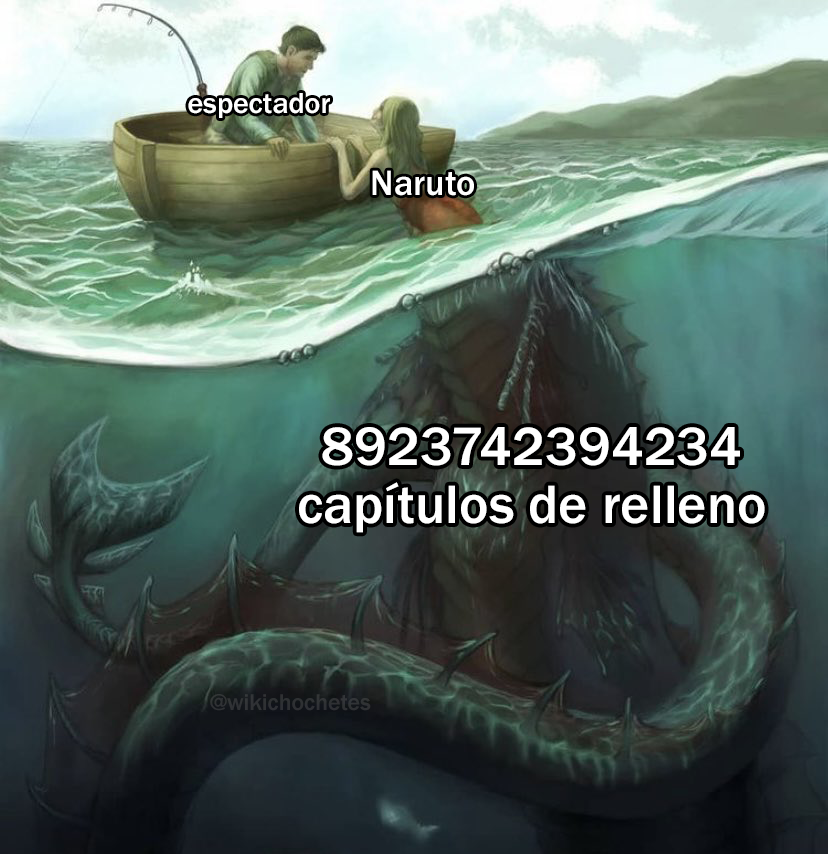
<style>
.page{position:relative;width:828px;height:854px}
.page>*{position:absolute;margin:0}
.t1{font:30px "FranklinGothic-Medium";color:#ffffff}
.t2{font:36.3px "FranklinGothic-Medium";color:#ffffff}
.t3{font:56px "FranklinGothic-Medium";color:#ffffff}
.t4{font:23.7px "FranklinGothic-Medium";color:#2f3135}
</style>
<div class="page">
<p class="t1" style="left:188px;top:93px;width:142px;height:25px">espectador</p>
<p class="t2" style="left:372px;top:170px;width:102px;height:26px">Naruto</p>
<p class="t3" style="left:299px;top:427px;width:466px;height:106px;text-align:center">8923742394234<br>capítulos de relleno</p>
<p class="t4" style="left:210px;top:694px;width:161px;height:17px">@wikichochetes</p>
</div>
